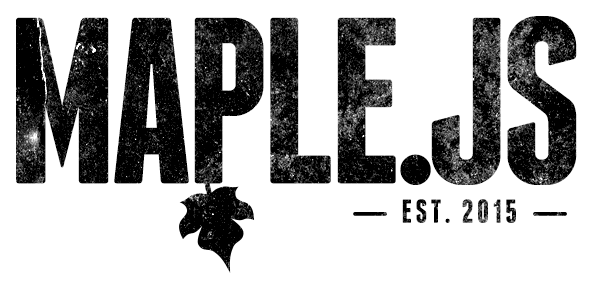
<style>
.page{position:relative;width:597px;height:283px;background:#ffffff}
.page>*{position:absolute;margin:0}
.t1{font:236.4px "FranchiseFree-Bold";letter-spacing:-0.04em;color:#000000;text-transform:uppercase}
.t2{font:33px "FranchiseFree-Bold";letter-spacing:0.1em;text-transform:uppercase}
</style>
<div class="page">
<p class="t1" style="left:16px;top:16px;width:561px;height:169px">Maple.js</p>
<p class="t2" style="left:402px;top:199px;width:114px;height:24px">Est. 2015</p>
</div>
